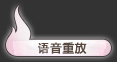
<style>
.page{position:relative;width:117px;height:62px;background:#333333}
.page>*{position:absolute;margin:0}
.t1{font:12px "AdobeFanHeitiStd-Bold";color:#59493f;font-weight:bold}
.t2{font:12px "AdobeHeitiStd-Regular";color:#59493f;font-weight:bold}
</style>
<div class="page">
<p class="t1" style="left:38px;top:42px;width:49px;height:12px"><span class="t2">语</span>音重放</p>
</div>
